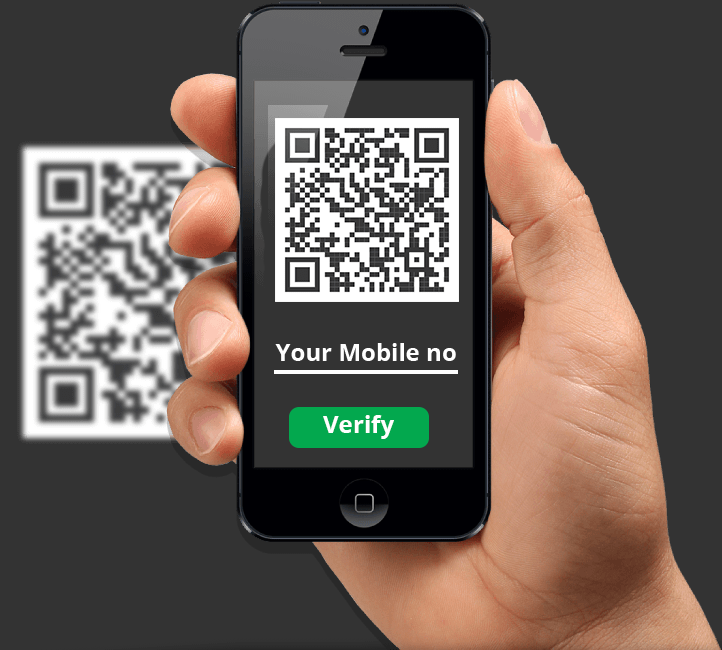
<style>
.page{position:relative;width:722px;height:650px;background:#333333}
.page>*{position:absolute;margin:0}
.t1{font:24px "OpenSans-Bold";color:#ffffff}
</style>
<div class="page">
<p class="t1" style="left:275px;top:343px;width:181px;height:18px">Your Mobile no</p>
<p class="t1" style="left:323px;top:415px;width:71px;height:24px">Verify</p>
</div>
